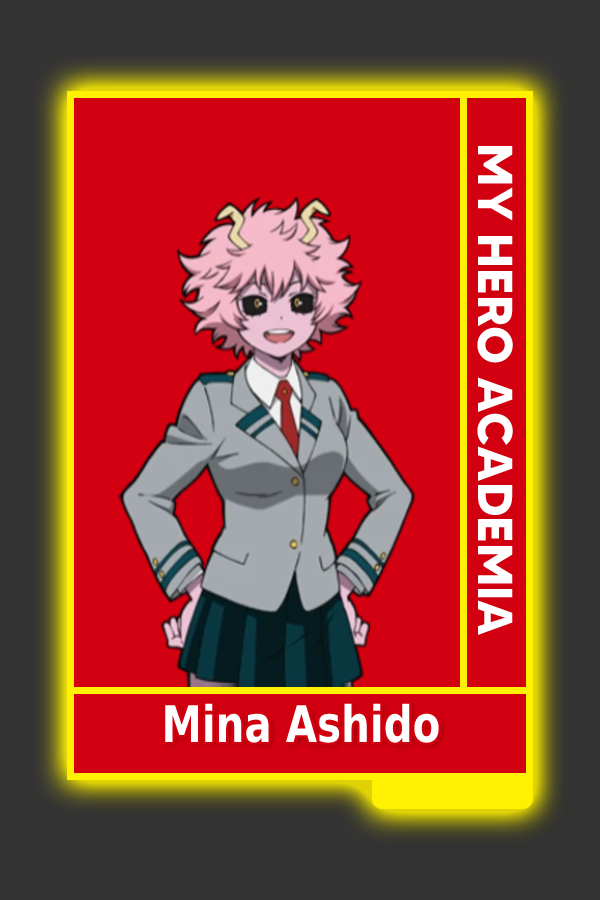
<style>
.page{position:relative;width:600px;height:900px;background:#d20010}
.page>*{position:absolute;margin:0}
.t1{font:48.8px "MADETOMMY-Bold";color:#ffffff}
.t2{font:50.5px "MADETOMMY-Bold";color:#ffffff;scale:0.8 1}
</style>
<div class="page">
<p class="t1" style="left:477px;top:146px;width:36px;height:489px;rotate:90deg">MY HERO ACADEMIA</p>
<p class="t2" style="left:165px;top:703px;width:274px;height:40px">Mina Ashido</p>
</div>
